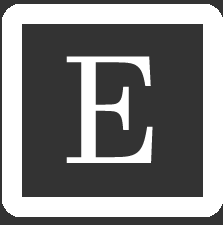
<style>
.page{position:relative;width:223px;height:225px;background:#333333}
.page>*{position:absolute;margin:0}
.t1{font:150px "JavaneseText";letter-spacing:0.035em;color:#ffffff}
</style>
<div class="page">
<p class="t1" style="left:66px;top:56px;width:87px;height:107px">E</p>
</div>
